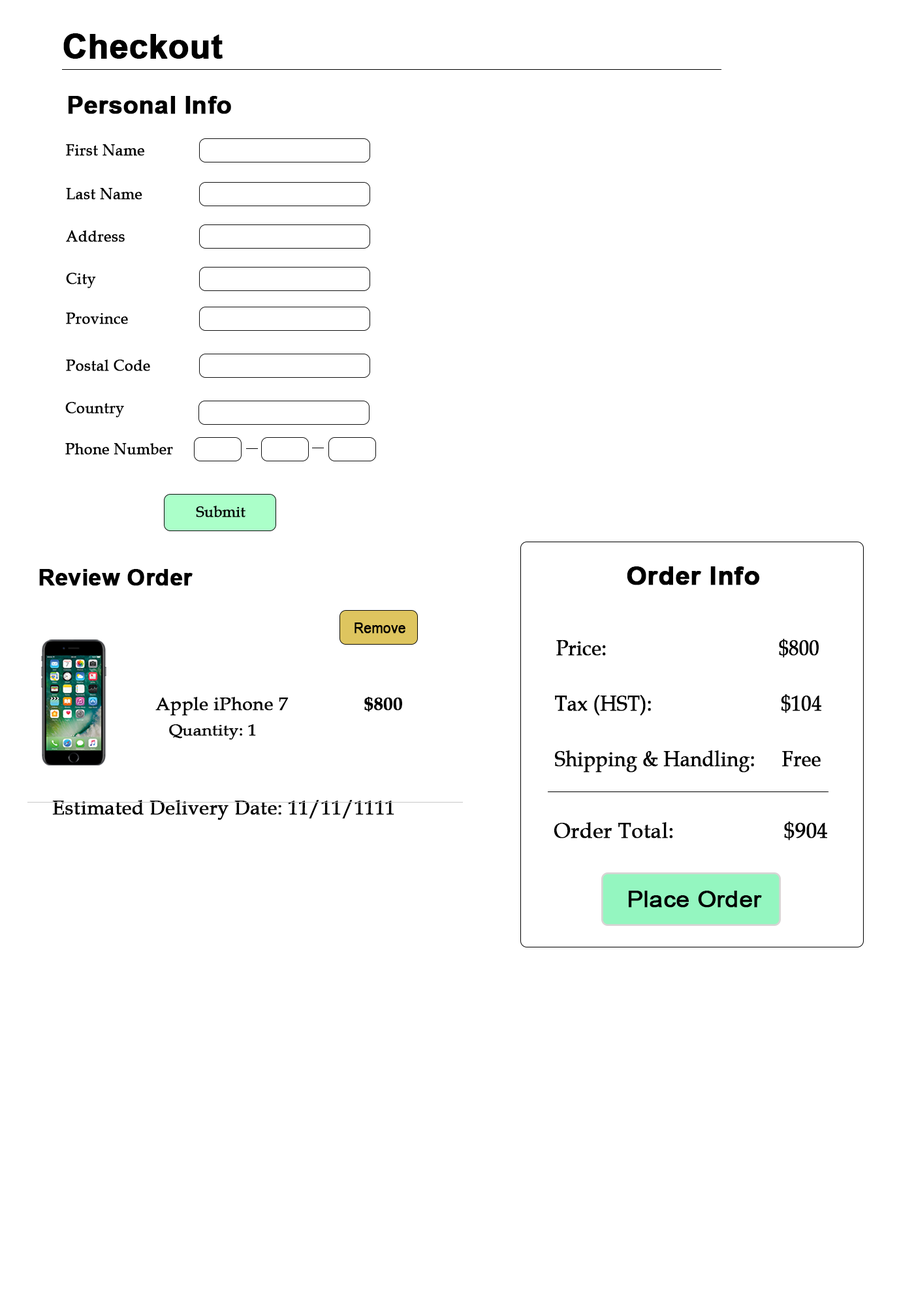
<style>
.page{position:relative;width:914px;height:1305px;background:#ffffff}
.page>*{position:absolute;margin:0}
.t1{font:33.7px "Arial-BoldMT";color:#000000;font-weight:bold}
.t2{font:24.8px "Arial-BoldMT";color:#000000;font-weight:bold}
.t3{font:15.7px "BookAntiqua";color:#000000;font-weight:bold;scale:0.97 1}
.t4{font:15.3px "BookAntiqua";color:#000000;font-weight:bold;scale:0.97 1}
.t5{font:22.8px "Arial-BoldMT";color:#000000;font-weight:bold}
.t6{font:25.4px "Arial-BoldMT";color:#000000;font-weight:bold;scale:1.04 1}
.t7{font:14.3px "ArialMT";color:#000000;font-weight:bold;scale:0.94 1}
.t8{font:21.5px "BookAntiqua";color:#000000;font-weight:bold;scale:0.9 1}
.t9{font:18.6px "BookAntiqua";color:#000000;font-weight:bold}
.t10{font:18.6px "BookAntiqua-Bold";color:#000000;font-weight:bold}
.t11{font:15.8px "BookAntiqua";color:#000000;font-weight:bold;scale:1.06 1}
.t12{font:19.6px "BookAntiqua";color:#000000;font-weight:bold}
.t13{font:21.5px "BookAntiqua";color:#000000;font-weight:bold}
.t14{font:22.7px "ArialMT";color:#000000;font-weight:bold;scale:1.06 1}
</style>
<div class="page">
<p class="t1" style="left:63px;top:33px;width:160px;height:26px">Checkout</p>
<p class="t2" style="left:68px;top:96px;width:163px;height:18px">Personal Info</p>
<p class="t3" style="left:66px;top:144px;width:78px;height:12px">First Name</p>
<p class="t3" style="left:66px;top:188px;width:76px;height:12px">Last Name</p>
<p class="t3" style="left:66px;top:230px;width:59px;height:12px">Address</p>
<p class="t3" style="left:66px;top:273px;width:30px;height:15px">City</p>
<p class="t3" style="left:66px;top:313px;width:62px;height:11px">Province</p>
<p class="t3" style="left:66px;top:360px;width:84px;height:11px">Postal Code</p>
<p class="t3" style="left:65px;top:402px;width:59px;height:16px">Country</p>
<p class="t3" style="left:65px;top:443px;width:108px;height:12px">Phone Number</p>
<p class="t4" style="left:196px;top:506px;width:49px;height:12px">Submit</p>
<p class="t5" style="left:39px;top:569px;width:154px;height:17px">Review Order</p>
<p class="t6" style="left:626px;top:566px;width:134px;height:19px">Order Info</p>
<p class="t7" style="left:354px;top:623px;width:51px;height:11px">Remove</p>
<p class="t8" style="left:556px;top:639px;width:262px;height:19px">Price:                                $800</p>
<p class="t9" style="left:155px;top:697px;width:133px;height:19px">Apple iPhone 7</p>
<p class="t10" style="left:364px;top:697px;width:38px;height:15px">$800</p>
<p class="t8" style="left:555px;top:694px;width:266px;height:22px">Tax (HST):                        $104</p>
<p class="t11" style="left:169px;top:724px;width:87px;height:16px">Quantity: 1</p>
<p class="t8" style="left:555px;top:750px;width:265px;height:23px">Shipping &amp; Handling:     Free</p>
<p class="t12" style="left:52px;top:800px;width:342px;height:20px">Estimated Delivery Date: 11/11/1111</p>
<p class="t13" style="left:553px;top:822px;width:274px;height:19px">Order Total:                   $904</p>
<p class="t14" style="left:628px;top:891px;width:134px;height:17px">Place Order</p>
</div>
